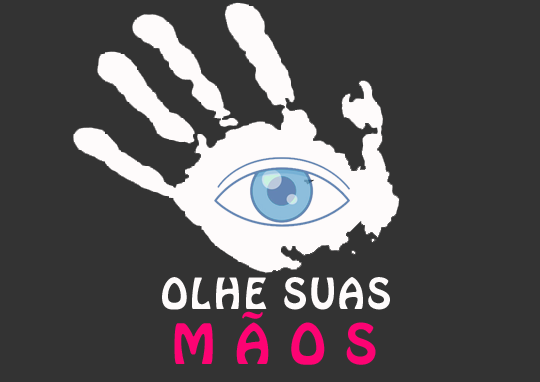
<style>
.page{position:relative;width:540px;height:382px;background:#333333}
.page>*{position:absolute;margin:0}
.t1{font:37.8px "HoboStd";letter-spacing:0.075em;color:#fefbfb}
.t2{font:49.1px "HoboStd";letter-spacing:0.4em;color:#fd0373}
</style>
<div class="page">
<p class="t1" style="left:162px;top:277px;width:228px;height:33px">OLHE SUAS</p>
<p class="t2" style="left:174px;top:311px;width:202px;height:54px">MÃOS</p>
</div>
